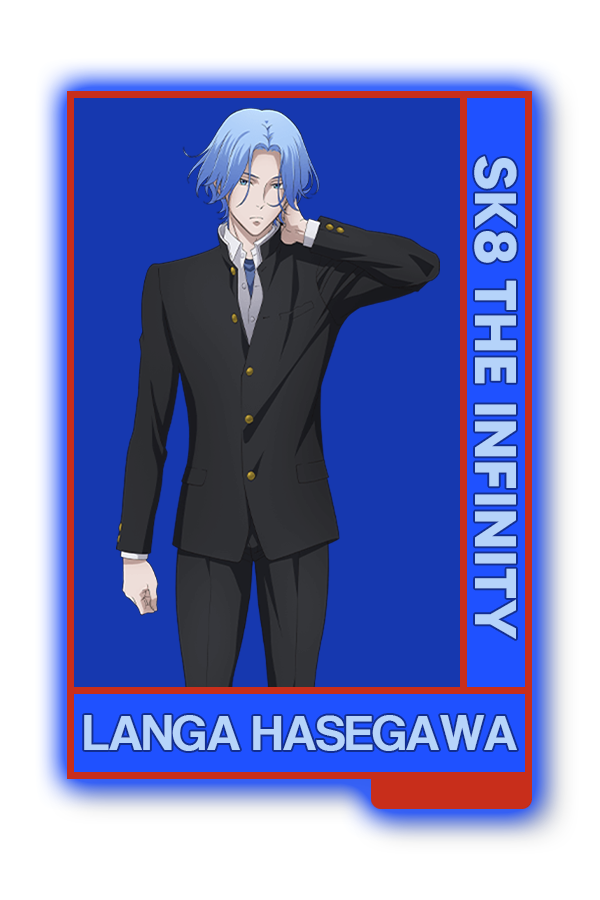
<style>
.page{position:relative;width:600px;height:900px;background:#1638af}
.page>*{position:absolute;margin:0}
.t1{font:58.4px "MADETOMMY-Bold";color:#b5d3fa}
.t2{font:51.7px "CoolveticaRg-Regular";color:#b6d4fa}
</style>
<div class="page">
<p class="t1" style="left:474px;top:156px;width:43px;height:483px;rotate:90deg">SK8 THE INFINITY</p>
<p class="t2" style="left:84px;top:715px;width:433px;height:36px">LANGA HASEGAWA</p>
</div>
